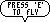
<style>
.page{position:relative;width:50px;height:22px;background:#ffffff}
.page>*{position:absolute;margin:0}
.t1{font:15px/7px "Pixelrom";letter-spacing:0.025em;color:#000000}
</style>
<div class="page">
<p class="t1" style="left:8px;top:2px;width:35px;height:13px;text-align:center">PRESS 'E'<br>TO FLY</p>
</div>
